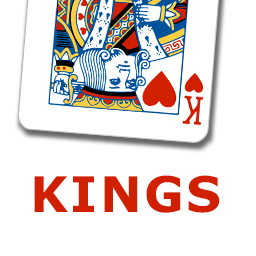
<style>
.page{position:relative;width:256px;height:256px;background:#ffffff}
.page>*{position:absolute;margin:0}
.t1{font:49.3px "Verdana-Bold";letter-spacing:0.05em;color:#d02000}
</style>
<div class="page">
<p class="t1" style="left:34px;top:175px;width:186px;height:38px">KINGS</p>
</div>
